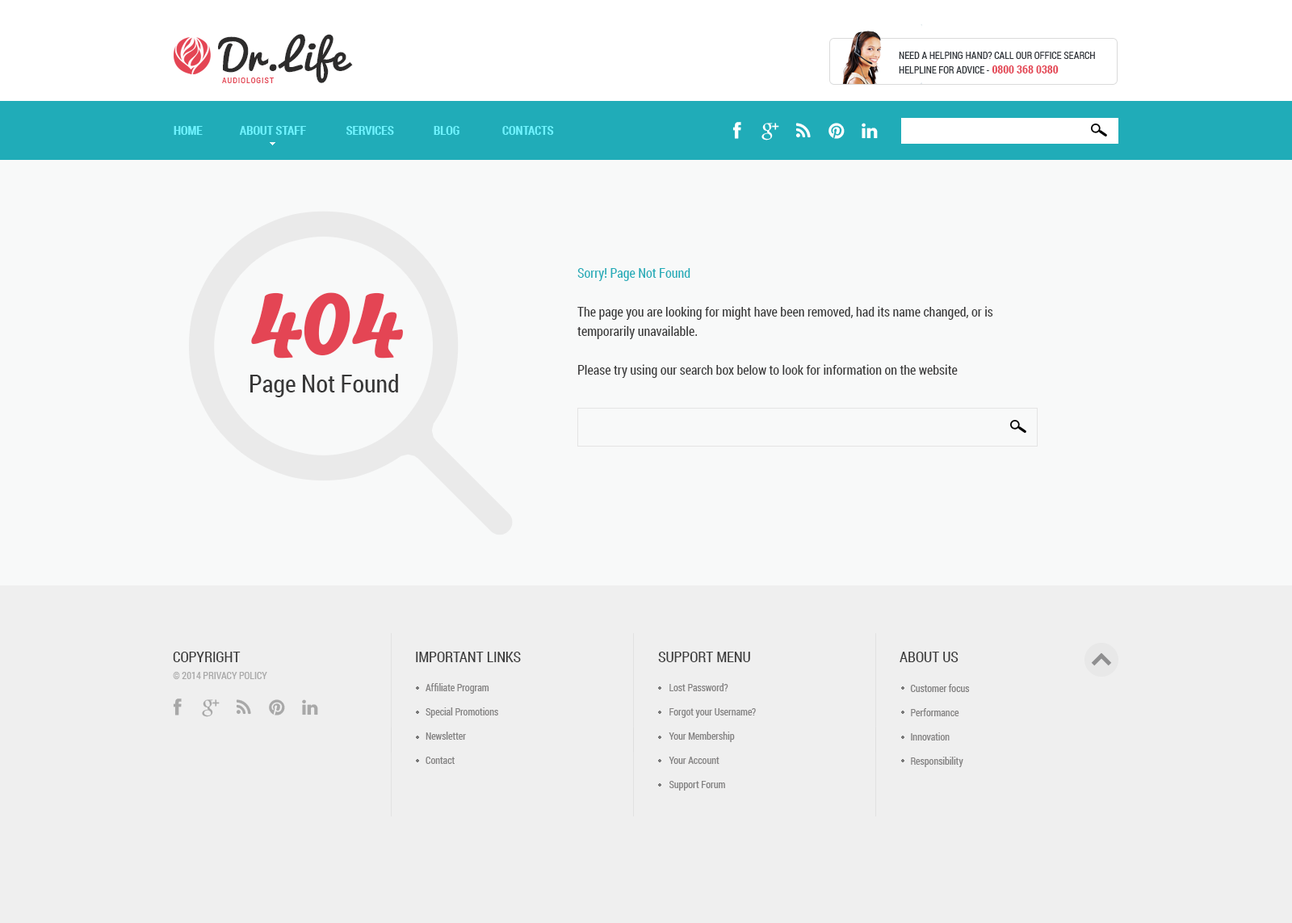
<style>
.page{position:relative;width:1292px;height:923px;background:#f8f9f9}
.page>*{position:absolute;margin:0}
.t1{font:40.4px "Pacifico-Regular";letter-spacing:0.05em;color:#2d2c2c}
.t2{font:9.7px/14.5px "RobotoCondensed-Regular";color:#2d3238;text-transform:uppercase}
.t3{font:11.3px/14.5px "RobotoCondensed-Bold";color:#e44554;text-transform:uppercase}
.t4{font:8.1px "RobotoCondensed-Regular";letter-spacing:0.1em;color:#e44554;text-transform:uppercase}
.t5{font:12.1px "RobotoCondensed-Bold";color:#6df3ff;text-transform:uppercase}
.t6{font:12.9px/19.4px "RobotoCondensed-Regular";color:#383838}
.t7{font:12.9px/19.4px "RobotoCondensed-Regular";color:#20acb8}
.t8{font:121.1px "Pacifico-Regular";color:#e44554}
.t9{font:24.2px "RobotoCondensed-Regular";color:#383838}
.t10{font:14.5px "RobotoCondensed-Regular";color:#3a3a3a;text-transform:uppercase}
.t11{font:9.7px "RobotoCondensed-Regular";color:#949494;text-transform:uppercase}
.t12{font:9.7px/24.2px "RobotoCondensed-Regular";color:#838282}
</style>
<div class="page">
<p class="t1" style="left:218px;top:34px;width:135px;height:49px">Dr.Life</p>
<p class="t2" style="left:899px;top:52px;width:196px;height:21px">Need a helping hand? Call our office search <br>helpline for advice - <span class="t3">0800 368 0380</span></p>
<p class="t4" style="left:222px;top:78px;width:52px;height:5px">Audiologist</p>
<p class="t5" style="left:174px;top:126px;width:380px;height:9px">Home              About staff               services               blog                Contacts</p>
<p class="t6" style="left:577px;top:268px;width:416px;height:110px"><span class="t7">Sorry! Page Not Found<br></span><br>The page you are looking for might have been removed, had its name changed, or is temporarily unavailable.<br><br>Please try using our search box below to look for information on the website</p>
<p class="t8" style="left:251px;top:292px;width:152px;height:67px">404</p>
<p class="t9" style="left:250px;top:374px;width:148px;height:23px">Page Not Found</p>
<p class="t10" style="left:173px;top:652px;width:68px;height:10px">copyright</p>
<p class="t10" style="left:416px;top:652px;width:105px;height:10px">Important Links</p>
<p class="t10" style="left:658px;top:652px;width:92px;height:10px">Support Menu</p>
<p class="t10" style="left:900px;top:652px;width:58px;height:10px">About Us</p>
<p class="t11" style="left:173px;top:672px;width:94px;height:7px;opacity:0.8">© 2014 Privacy policy</p>
<p class="t12" style="left:426px;top:683px;width:72px;height:81px">Affiliate Program<br>Special Promotions<br>Newsletter<br>Contact</p>
<p class="t12" style="left:669px;top:683px;width:87px;height:108px">Lost Password?<br>    Forgot your Username?<br>    Your Membership<br>    Your Account<br>    Support Forum<br><br>Human health</p>
<p class="t12" style="left:910px;top:684px;width:60px;height:83px">Customer focus<br>    Performance<br>    Innovation<br>    Responsibility</p>
</div>
